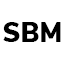
<style>
.page{position:relative;width:64px;height:64px;background:#ffffff}
.page>*{position:absolute;margin:0}
.t1{font:27px "NunitoSans-Black";color:#000000}
</style>
<div class="page">
<p class="t1" style="left:3px;top:22px;width:58px;height:20px">SBM</p>
</div>
